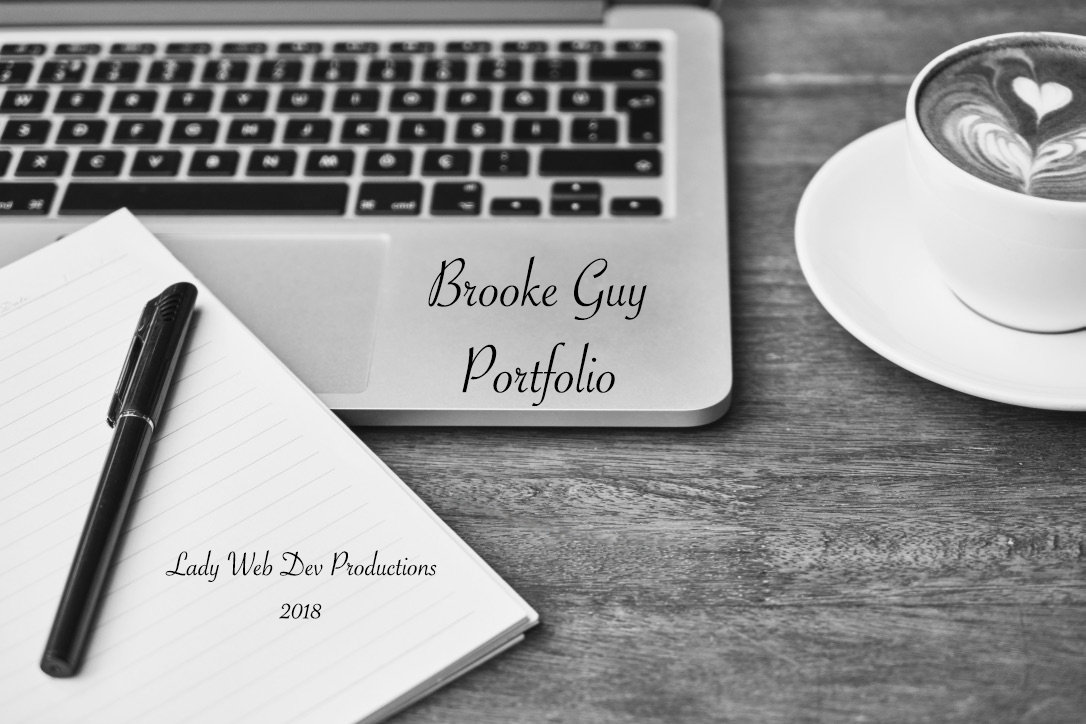
<style>
.page{position:relative;width:1086px;height:724px}
.page>*{position:absolute;margin:0}
.t1{font:72px "SavoyeLetPlain";color:#000000}
.t2{font:36px "SavoyeLetPlain";color:#000000}
</style>
<div class="page">
<p class="t1" style="left:428px;top:256px;width:219px;height:151px;text-align:center">Brooke Guy<br>Portfolio<br>P</p>
<p class="t2" style="left:165px;top:550px;width:272px;height:69px;text-align:center">Lady Web Dev Productions<br>2018</p>
</div>
